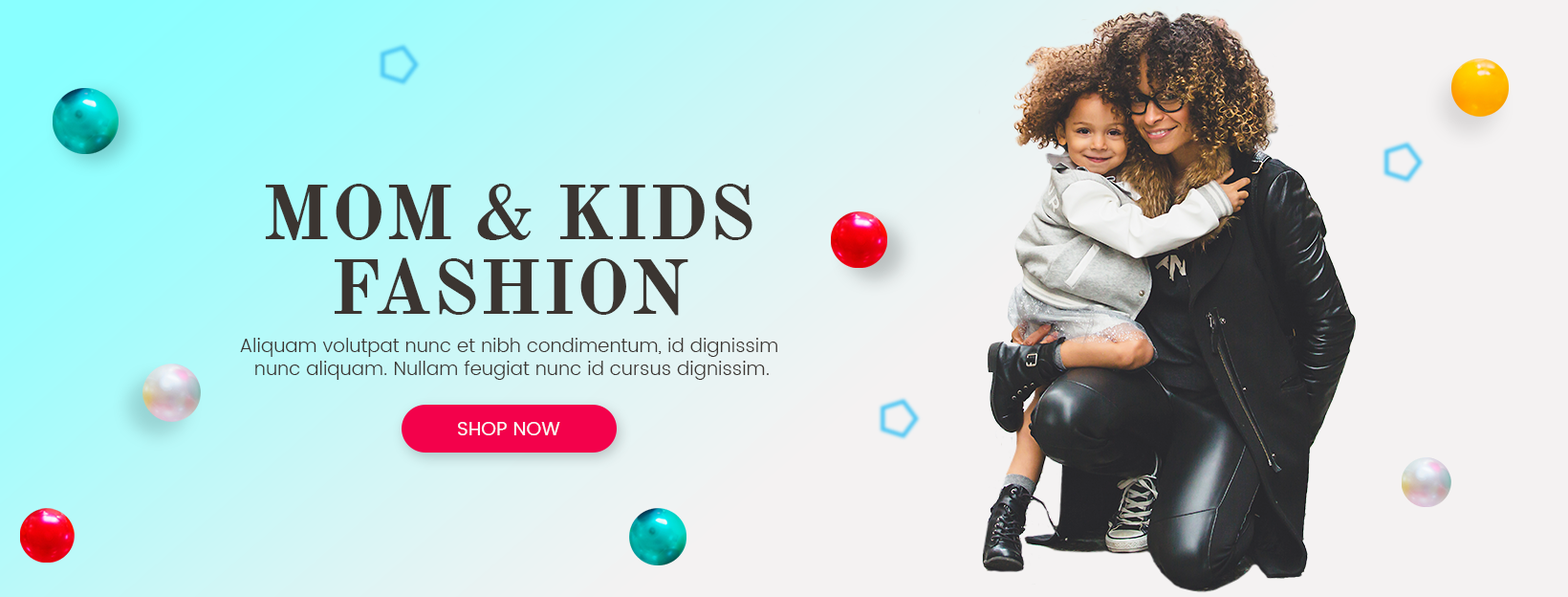
<style>
.page{position:relative;width:1568px;height:597px;background:#f4f2f2}
.page>*{position:absolute;margin:0}
.t1{font:76.5px/74.6px "OldStandardTT-Bold";color:#3b3531}
.t2{font:19.1px "Poppins-Light";color:#3b3531}
.t3{font:19.1px "Poppins-Regular";color:#f9f8f7}
</style>
<div class="page">
<p class="t1" style="left:265px;top:184px;width:487px;height:132px;text-align:center">MOM &amp; KIDS<br>FASHION</p>
<p class="t2" style="left:240px;top:338px;width:537px;height:42px;text-align:center">Aliquam volutpat nunc et nibh condimentum, id dignissim <br>nunc aliquam. Nullam feugiat nunc id cursus dignissim.</p>
<p class="t3" style="left:458px;top:422px;width:102px;height:13px">SHOP NOW</p>
</div>
